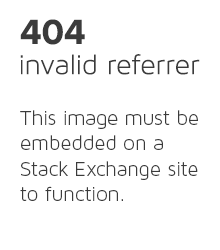
<style>
.page{position:relative;width:220px;height:250px;background:#ffffff}
.page>*{position:absolute;margin:0}
.t1{font:36.1px "ProximaNova-Bold";color:#3b3b3b}
.t2{font:29px "MavenProLight300-Regular";color:#3b3b3b}
.t3{font:21px "MavenProLight300-Regular";color:#3b3b3b}
</style>
<div class="page">
<p class="t1" style="left:20px;top:19px;width:65px;height:26px">404</p>
<p class="t2" style="left:20px;top:54px;width:180px;height:21px">invalid referrer</p>
<p class="t3" style="left:20px;top:110px;width:178px;height:91px">This image must be embedded on a Stack Exchange site to function.</p>
</div>
